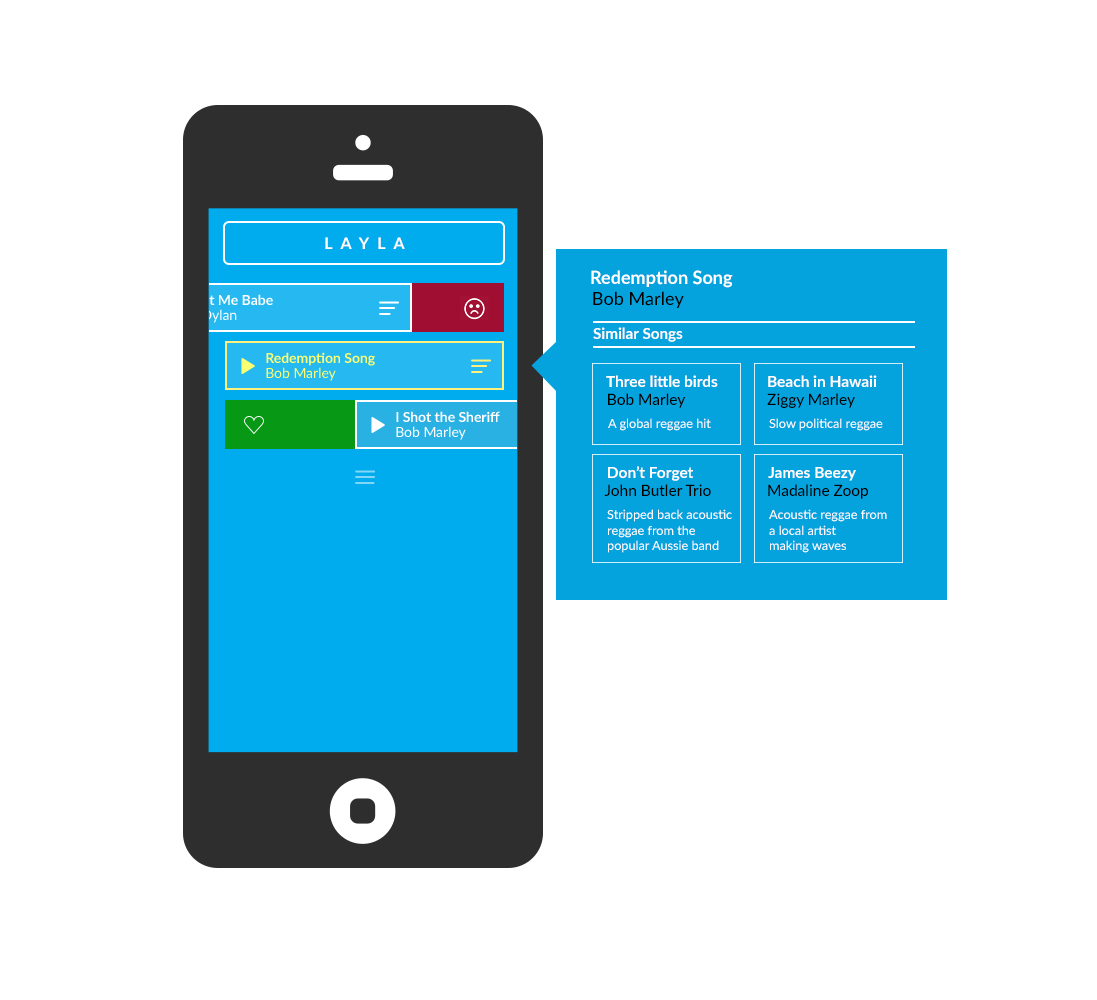
<style>
.page{position:relative;width:1097px;height:1000px;background:#ffffff}
.page>*{position:absolute;margin:0}
.t1{font:16px "Lato-Bold";letter-spacing:0.5em;color:#ffffff}
.t2{font:18.1px "Lato-Bold";color:#ffffff}
.t3{font:18.1px "Lato-Medium";color:#000000}
.t4{font:15.2px "Lato-Bold";color:#ffffff}
.t5{font:15.5px "Lato-Bold";color:#ffffff}
.t6{font:15.5px "Lato-Medium";color:#000000}
.t7{font:12.7px "Lato-Regular";color:#ffffff}
</style>
<div class="page">
<p class="t1" style="left:325px;top:237px;width:80px;height:12px">LAYLA</p>
<p class="t2" style="left:591px;top:270px;width:142px;height:18px">Redemption Song</p>
<p class="t3" style="left:593px;top:291px;width:91px;height:17px">Bob Marley</p>
<p class="t4" style="left:593px;top:327px;width:90px;height:15px">Similar Songs</p>
<p class="t5" style="left:606px;top:375px;width:112px;height:12px">Three little birds</p>
<p class="t5" style="left:768px;top:375px;width:109px;height:12px">Beach in Hawaii</p>
<p class="t6" style="left:608px;top:393px;width:78px;height:15px">Bob Marley</p>
<p class="t6" style="left:767px;top:393px;width:88px;height:15px">Ziggy Marley</p>
<p class="t7" style="left:608px;top:418px;width:103px;height:13px">A global reggae hit</p>
<p class="t7" style="left:769px;top:418px;width:114px;height:13px">Slow political reggae</p>
<p class="t5" style="left:608px;top:466px;width:86px;height:15px">Don’t Forget</p>
<p class="t5" style="left:768px;top:467px;width:88px;height:14px">James Beezy</p>
<p class="t6" style="left:604px;top:484px;width:107px;height:12px">John Butler Trio</p>
<p class="t6" style="left:768px;top:484px;width:100px;height:15px">Madaline Zoop</p>
<p class="t7" style="left:607px;top:509px;width:125px;height:44px">Stripped back acoustic <br>reggae from the <br>popular Aussie band</p>
<p class="t7" style="left:769px;top:509px;width:118px;height:44px">Acoustic reggae from<br>a local artist <br>making waves</p>
</div>
